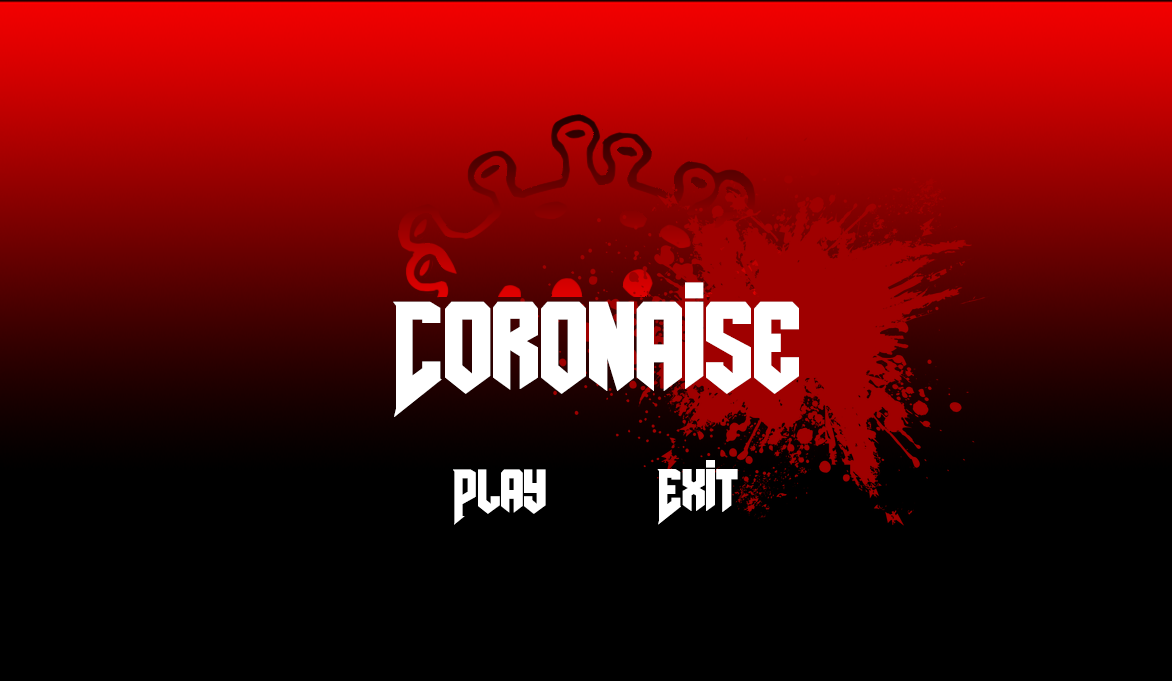
<style>
.page{position:relative;width:1172px;height:681px;background:#000000}
.page>*{position:absolute;margin:0}
.t1{font:147.4px "AmazDooMLeft";color:#ffffff}
.t2{font:70.6px "AmazDooMLeft";color:#ffffff}
</style>
<div class="page">
<p class="t1" style="left:393px;top:282px;width:406px;height:135px">Coronaise</p>
<p class="t2" style="left:657px;top:460px;width:81px;height:65px">Exit</p>
<p class="t2" style="left:453px;top:469px;width:93px;height:56px">Play</p>
</div>
